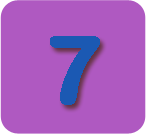
<style>
.page{position:relative;width:146px;height:134px;background:#af59c1}
.page>*{position:absolute;margin:0}
.t1{font:94.7px "ArialRoundedMTBold";letter-spacing:-0.01em;color:#1b59b3;font-weight:bold}
</style>
<div class="page">
<p class="t1" style="left:50px;top:36px;width:50px;height:69px">7</p>
</div>
